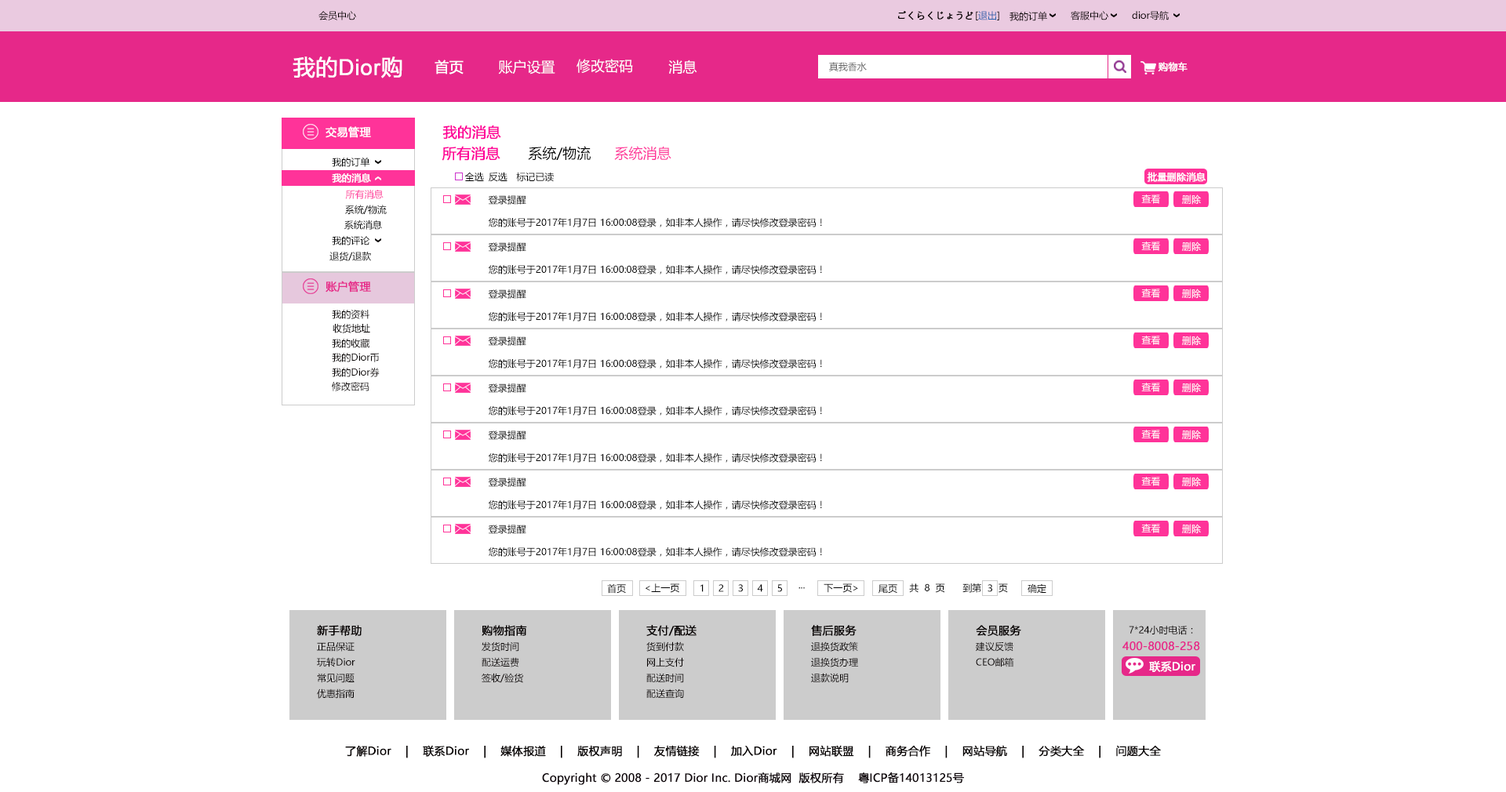
<style>
.page{position:relative;width:1506px;height:792px;background:#ffffff}
.page>*{position:absolute;margin:0}
.t1{font:9.4px "MicrosoftYaHei";color:#040000}
.t2{font:9.4px "MicrosoftYaHei";color:#040000;font-weight:bold}
.t3{font:9.4px "MicrosoftYaHei";color:#2a62ae}
.t4{font:22px "ArialMT";color:#ffffff;font-weight:bold}
.t5{font:22px "MicrosoftYaHei";color:#ffffff;font-weight:bold}
.t6{font:14.1px "MicrosoftYaHei";color:#ffffff;font-weight:bold}
.t7{font:14.1px "MicrosoftYaHei";color:#ffffff}
.t8{font:9.4px "MicrosoftYaHei";color:#666666}
.t9{font:9.4px "MicrosoftYaHei";color:#ffffff;font-weight:bold}
.t10{font:14.1px "MicrosoftYaHei";color:#ff0099;font-weight:bold}
.t11{font:11px "MicrosoftYaHei";color:#ffffff;font-weight:bold}
.t12{font:14.1px "MicrosoftYaHei";color:#000000}
.t13{font:14.1px "MicrosoftYaHei";color:#ff3399}
.t14{font:9.4px "MicrosoftYaHei";color:#000000}
.t15{font:9.4px "MicrosoftYaHei";color:#ff3399}
.t16{font:9.4px "MicrosoftYaHei";color:#ffffff}
.t17{font:11px "MicrosoftYaHei";color:#e62889;font-weight:bold}
.t18{font:9.4px "MicrosoftYaHei"}
.t19{font:11px "MicrosoftYaHei";color:#040000;font-weight:bold}
.t20{font:11px "MicrosoftYaHei";color:#000000;font-weight:bold}
</style>
<div class="page">
<p class="t1" style="left:318px;top:11px;width:38px;height:9px">会员中心</p>
<p class="t2" style="left:898px;top:11px;width:75px;height:9px">ごくらくじょうど</p>
<p class="t3" style="left:975px;top:11px;width:24px;height:9px"><span class="t1">[</span>退出<span class="t1">]</span></p>
<p class="t1" style="left:1009px;top:11px;width:38px;height:10px">我的订单</p>
<p class="t1" style="left:1070px;top:11px;width:38px;height:9px">客服中心</p>
<p class="t1" style="left:1132px;top:11px;width:36px;height:9px">dior导航</p>
<p class="t4" style="left:292px;top:56px;width:110px;height:22px"><span class="t5">我的</span>Dior<span class="t5">购</span></p>
<p class="t6" style="left:434px;top:60px;width:29px;height:14px">首页</p>
<p class="t7" style="left:498px;top:60px;width:57px;height:14px">账户设置</p>
<p class="t7" style="left:576px;top:59px;width:57px;height:14px">修改密码</p>
<p class="t7" style="left:668px;top:60px;width:29px;height:14px">消息</p>
<p class="t8" style="left:829px;top:62px;width:37px;height:9px">真我香水</p>
<p class="t9" style="left:1157px;top:62px;width:30px;height:10px">购物车</p>
<p class="t10" style="left:442px;top:125px;width:59px;height:15px">我的消息</p>
<p class="t11" style="left:325px;top:126px;width:46px;height:12px">交易管理</p>
<p class="t10" style="left:441px;top:146px;width:59px;height:15px">所有消息</p>
<p class="t12" style="left:528px;top:146px;width:62px;height:15px">系统/物流</p>
<p class="t13" style="left:614px;top:146px;width:57px;height:15px">系统消息</p>
<p class="t14" style="left:332px;top:157px;width:38px;height:10px">我的订单</p>
<p class="t9" style="left:332px;top:173px;width:39px;height:10px">我的消息</p>
<p class="t14" style="left:464px;top:172px;width:20px;height:9px">全选</p>
<p class="t14" style="left:489px;top:172px;width:18px;height:10px">反选</p>
<p class="t14" style="left:516px;top:172px;width:38px;height:10px">标记已读</p>
<p class="t9" style="left:1146px;top:172px;width:59px;height:10px">批量删除消息</p>
<p class="t15" style="left:345px;top:190px;width:38px;height:9px">所有消息</p>
<p class="t14" style="left:488px;top:195px;width:38px;height:10px">登录提醒</p>
<p class="t16" style="left:1141px;top:194px;width:19px;height:10px">查看</p>
<p class="t16" style="left:1182px;top:194px;width:19px;height:11px">删除</p>
<p class="t14" style="left:345px;top:205px;width:42px;height:10px">系统/物流</p>
<p class="t14" style="left:344px;top:220px;width:38px;height:10px">系统消息</p>
<p class="t14" style="left:488px;top:217px;width:334px;height:10px">您的账号于2017年1月7日 16:00:08登录，如非本人操作，请尽快修改登录密码！</p>
<p class="t14" style="left:332px;top:236px;width:38px;height:9px">我的评论</p>
<p class="t14" style="left:488px;top:242px;width:38px;height:10px">登录提醒</p>
<p class="t16" style="left:1141px;top:242px;width:19px;height:9px">查看</p>
<p class="t16" style="left:1182px;top:242px;width:19px;height:10px">删除</p>
<p class="t14" style="left:329px;top:252px;width:42px;height:9px">退货/退款</p>
<p class="t14" style="left:488px;top:264px;width:334px;height:10px">您的账号于2017年1月7日 16:00:08登录，如非本人操作，请尽快修改登录密码！</p>
<p class="t17" style="left:325px;top:281px;width:46px;height:11px">账户管理</p>
<p class="t14" style="left:488px;top:289px;width:38px;height:10px">登录提醒</p>
<p class="t16" style="left:1141px;top:289px;width:19px;height:9px">查看</p>
<p class="t16" style="left:1182px;top:289px;width:19px;height:10px">删除</p>
<p class="t1" style="left:332px;top:309px;width:37px;height:10px">我的资料</p>
<p class="t14" style="left:488px;top:311px;width:334px;height:11px">您的账号于2017年1月7日 16:00:08登录，如非本人操作，请尽快修改登录密码！</p>
<p class="t1" style="left:332px;top:324px;width:38px;height:9px">收货地址</p>
<p class="t1" style="left:332px;top:339px;width:38px;height:9px">我的收藏</p>
<p class="t14" style="left:488px;top:336px;width:38px;height:10px">登录提醒</p>
<p class="t16" style="left:1141px;top:336px;width:19px;height:9px">查看</p>
<p class="t16" style="left:1182px;top:336px;width:19px;height:10px">删除</p>
<p class="t1" style="left:332px;top:353px;width:47px;height:9px">我的Dior币</p>
<p class="t14" style="left:488px;top:358px;width:334px;height:11px">您的账号于2017年1月7日 16:00:08登录，如非本人操作，请尽快修改登录密码！</p>
<p class="t1" style="left:332px;top:368px;width:48px;height:9px">我的Dior券</p>
<p class="t1" style="left:332px;top:382px;width:37px;height:9px">修改密码</p>
<p class="t14" style="left:488px;top:383px;width:38px;height:10px">登录提醒</p>
<p class="t16" style="left:1141px;top:383px;width:19px;height:9px">查看</p>
<p class="t16" style="left:1182px;top:383px;width:19px;height:10px">删除</p>
<p class="t14" style="left:488px;top:405px;width:334px;height:11px">您的账号于2017年1月7日 16:00:08登录，如非本人操作，请尽快修改登录密码！</p>
<p class="t14" style="left:488px;top:431px;width:38px;height:9px">登录提醒</p>
<p class="t16" style="left:1141px;top:430px;width:19px;height:9px">查看</p>
<p class="t16" style="left:1182px;top:430px;width:19px;height:10px">删除</p>
<p class="t14" style="left:488px;top:452px;width:334px;height:11px">您的账号于2017年1月7日 16:00:08登录，如非本人操作，请尽快修改登录密码！</p>
<p class="t14" style="left:488px;top:478px;width:38px;height:9px">登录提醒</p>
<p class="t16" style="left:1141px;top:477px;width:19px;height:9px">查看</p>
<p class="t16" style="left:1182px;top:477px;width:19px;height:10px">删除</p>
<p class="t14" style="left:488px;top:500px;width:334px;height:10px">您的账号于2017年1月7日 16:00:08登录，如非本人操作，请尽快修改登录密码！</p>
<p class="t14" style="left:488px;top:525px;width:38px;height:9px">登录提醒</p>
<p class="t16" style="left:1141px;top:524px;width:19px;height:9px">查看</p>
<p class="t16" style="left:1182px;top:524px;width:19px;height:10px">删除</p>
<p class="t14" style="left:488px;top:547px;width:334px;height:10px">您的账号于2017年1月7日 16:00:08登录，如非本人操作，请尽快修改登录密码！</p>
<p class="t14" style="left:607px;top:583px;width:19px;height:11px">首页</p>
<p class="t14" style="left:645px;top:583px;width:34px;height:10px">&lt;上一页</p>
<p class="t14" style="left:700px;top:584px;width:3px;height:8px">1</p>
<p class="t14" style="left:718px;top:584px;width:6px;height:8px">2</p>
<p class="t14" style="left:738px;top:584px;width:5px;height:8px">3</p>
<p class="t14" style="left:757px;top:584px;width:6px;height:8px">4</p>
<p class="t14" style="left:777px;top:584px;width:5px;height:8px">5</p>
<p class="t18" style="left:798px;top:587px;width:7px;height:2px">...</p>
<p class="t14" style="left:823px;top:583px;width:35px;height:10px">下一页&gt;</p>
<p class="t14" style="left:878px;top:584px;width:19px;height:10px">尾页</p>
<p class="t14" style="left:909px;top:583px;width:36px;height:10px">共  8  页</p>
<p class="t14" style="left:962px;top:583px;width:46px;height:10px">到第      页</p>
<p class="t14" style="left:987px;top:584px;width:5px;height:8px">3</p>
<p class="t14" style="left:1027px;top:583px;width:19px;height:11px">确定</p>
<p class="t19" style="left:317px;top:625px;width:44px;height:11px">新手帮助</p>
<p class="t19" style="left:481px;top:625px;width:46px;height:11px">购物指南</p>
<p class="t19" style="left:646px;top:625px;width:50px;height:11px">支付/配送</p>
<p class="t19" style="left:811px;top:625px;width:45px;height:11px">售后服务</p>
<p class="t19" style="left:975px;top:625px;width:46px;height:11px">会员服务</p>
<p class="t1" style="left:1128px;top:625px;width:65px;height:10px">7*24小时电话：</p>
<p class="t1" style="left:481px;top:641px;width:38px;height:11px">发货时间</p>
<p class="t1" style="left:646px;top:641px;width:38px;height:11px">货到付款</p>
<p class="t1" style="left:811px;top:641px;width:47px;height:11px">退换货政策</p>
<p class="t1" style="left:975px;top:641px;width:38px;height:11px">建议反馈</p>
<p class="t17" style="left:1122px;top:641px;width:78px;height:10px">400-8008-258</p>
<p class="t1" style="left:317px;top:642px;width:37px;height:10px">正品保证</p>
<p class="t1" style="left:317px;top:657px;width:38px;height:10px">玩转Dior</p>
<p class="t1" style="left:481px;top:657px;width:38px;height:10px">配送运费</p>
<p class="t1" style="left:647px;top:657px;width:37px;height:10px">网上支付</p>
<p class="t1" style="left:811px;top:657px;width:47px;height:10px">退换货办理</p>
<p class="t1" style="left:975px;top:657px;width:39px;height:10px">CEO邮箱</p>
<p class="t11" style="left:1149px;top:661px;width:46px;height:11px">联系Dior</p>
<p class="t1" style="left:317px;top:673px;width:37px;height:10px">常见问题</p>
<p class="t1" style="left:481px;top:673px;width:42px;height:10px">签收/验货</p>
<p class="t1" style="left:646px;top:673px;width:38px;height:10px">配送时间</p>
<p class="t1" style="left:811px;top:673px;width:37px;height:10px">退款说明</p>
<p class="t1" style="left:317px;top:688px;width:37px;height:11px">优惠指南</p>
<p class="t1" style="left:646px;top:688px;width:38px;height:10px">配送查询</p>
<p class="t19" style="left:345px;top:745px;width:816px;height:13px">了解Dior    |    联系Dior    |    媒体报道    |    版权声明    |    友情链接    |    加入Dior    |    网站联盟    |    商务合作    |    网站导航    |    分类大全    |    问题大全</p>
<p class="t20" style="left:542px;top:772px;width:422px;height:13px">Copyright © 2008 - 2017 Dior Inc. Dior商城网  版权所有    粤ICP备14013125号</p>
</div>
